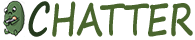
<style>
.page{position:relative;width:195px;height:40px;background:#ffffff}
.page>*{position:absolute;margin:0}
.t1{font:44.9px "SegoePrint-Bold";color:#49652d;scale:0.74 1}
.t2{font:44.9px "SegoePrint-Bold";color:#253a1d;scale:0.74 1}
</style>
<div class="page">
<p class="t1" style="left:28px;top:1px;width:165px;height:36px"><span class="t2">C</span>HATTER</p>
</div>
